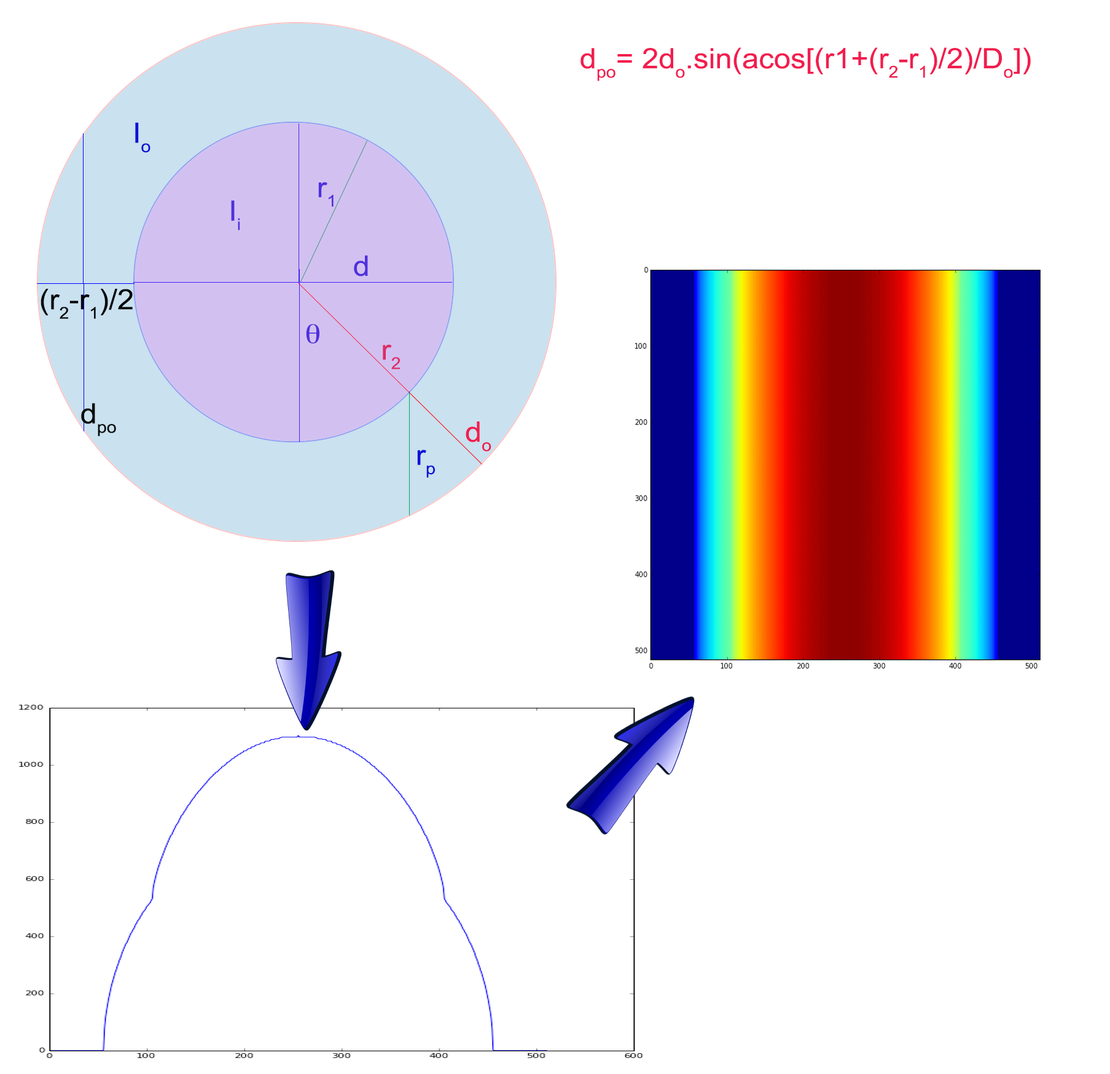
<style>
.page{position:relative;width:1110px;height:1074px;background:#ffffff}
.page>*{position:absolute;margin:0}
.t1{font:28.2px "ArialMT";color:#f21d4f;scale:1.07 1}
.t2{font:28.2px "ArialMT";color:#0c11d6;scale:1.07 1}
.t3{font:28.2px "ArialMT";color:#4e30de;scale:1.07 1}
.t4{font:28.2px "ArialMT";color:#060708;scale:1.07 1}
.t5{font:28.2px "ArialMT";color:#db2d68;scale:1.07 1}
</style>
<div class="page">
<p class="t1" style="left:581px;top:47px;width:450px;height:34px">dpo= 2do.sin(acos[(r1+(r2-r1)/2)/Do])</p>
<p class="t2" style="left:135px;top:122px;width:16px;height:30px">Io</p>
<p class="t3" style="left:318px;top:182px;width:16px;height:25px">r1</p>
<p class="t3" style="left:231px;top:200px;width:9px;height:30px">Ii</p>
<p class="t3" style="left:354px;top:255px;width:14px;height:21px">d</p>
<p class="t4" style="left:41px;top:289px;width:92px;height:30px">(r2-r1)/2</p>
<p class="t5" style="left:383px;top:345px;width:18px;height:24px">r2</p>
<p class="t4" style="left:81px;top:403px;width:35px;height:33px">dpo</p>
<p class="t1" style="left:466px;top:421px;width:26px;height:31px">do</p>
<p class="t2" style="left:417px;top:450px;width:18px;height:28px">rp</p>
</div>
